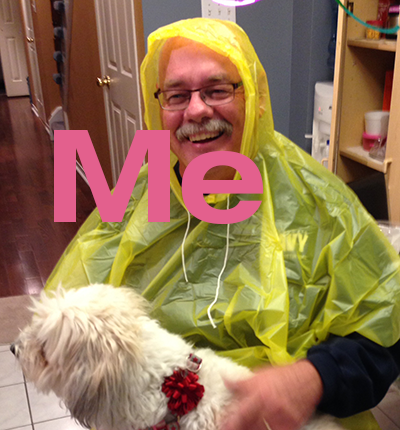
<style>
.page{position:relative;width:400px;height:430px}
.page>*{position:absolute;margin:0}
.t1{font:129.1px "HelveticaNeueLTPro-BdEx";color:#e3608d;scale:0.9 1}
</style>
<div class="page">
<p class="t1" style="left:54px;top:130px;width:210px;height:94px">Me</p>
</div>
